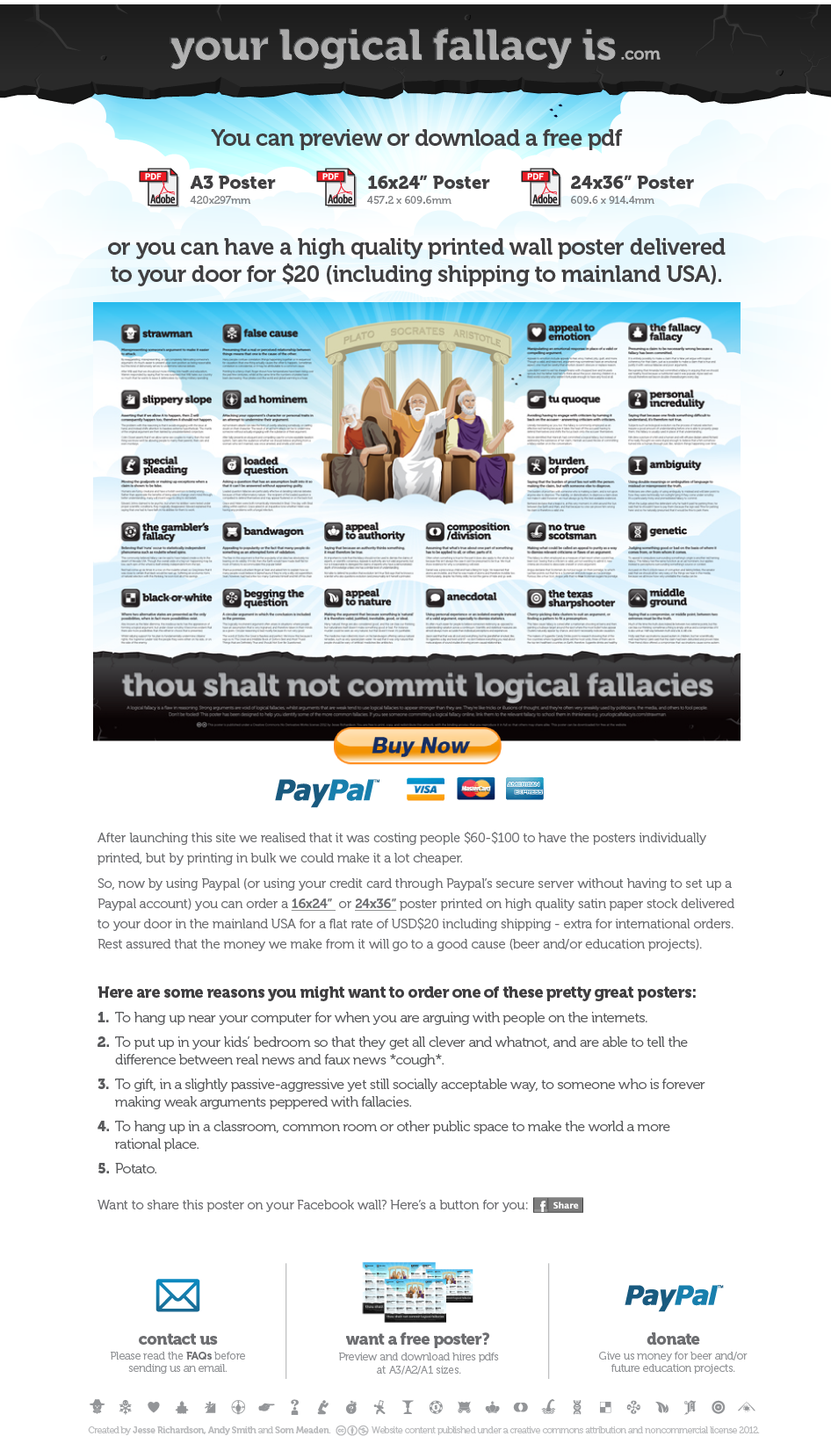
<style>
.page{position:relative;width:831px;height:1436px;background:#ffffff}
.page>*{position:absolute;margin:0}
.t1{font:22.8px "Museo-700";letter-spacing:-0.028em;color:#414042}
.t2{font:18.3px "Museo-900";color:#414042}
.t3{font:10.4px "Museo-500";color:#808285}
.t4{font:10.4px "Museo-900";color:#808285}
.t5{font:22.8px "Museo-700";letter-spacing:-0.025em;color:#414042}
.t6{font:13.2px/20.2px "Museo-300";letter-spacing:-0.01em;color:#6d6e71}
.t7{font:13.2px/20.2px "Museo-700";letter-spacing:-0.01em;color:#6d6e71;text-decoration:underline}
.t8{font:14px/17.6px "Museo-300";letter-spacing:-0.025em;color:#58595b}
.t9{font:15.6px "Museo-900";letter-spacing:-0.025em;color:#414042}
.t10{font:14px/17.6px "Museo-900";letter-spacing:-0.025em;color:#58595b}
.t11{font:13.2px "Museo-300";letter-spacing:-0.01em;color:#6d6e71}
.t12{font:16.2px "Museo-900";letter-spacing:-0.035em;color:#6d6e71}
.t13{font:10.8px "Museo-300";letter-spacing:-0.01em;color:#939598}
.t14{font:10.8px "Museo-700";letter-spacing:-0.01em;color:#6d6e71}
.t15{font:9.2px "Museo-300";letter-spacing:-0.035em;color:#babbbd}
.t16{font:9.2px "Museo-700";letter-spacing:-0.035em;color:#babbbd}
</style>
<div class="page">
<p class="t1" style="left:211px;top:129px;width:412px;height:21px">You can preview or download a free pdf</p>
<p class="t2" style="left:191px;top:176px;width:85px;height:13px">A3 Poster</p>
<p class="t2" style="left:368px;top:175px;width:122px;height:14px">16x24” Poster</p>
<p class="t2" style="left:571px;top:175px;width:123px;height:14px">24x36” Poster</p>
<p class="t3" style="left:190px;top:196px;width:61px;height:8px">420x297mm</p>
<p class="t3" style="left:367px;top:196px;width:84px;height:8px">457<span class="t4">.</span>2 x 609<span class="t4">.</span>6mm</p>
<p class="t3" style="left:571px;top:196px;width:83px;height:8px">609<span class="t4">.</span>6 x 914<span class="t4">.</span>4mm</p>
<p class="t5" style="left:108px;top:238px;width:617px;height:48px;text-align:center">or you can have a high quality printed wall poster delivered to your door for $20 (including shipping to mainland USA).</p>
<p class="t6" style="left:97px;top:832px;width:637px;height:119px">After launching this site we realised that it was costing people $60-$100 to have the posters individually printed, but by printing in bulk we could make it a lot cheaper. <br>So, now by using Paypal (or using your credit card through Paypal’s secure server without having to set up a Paypal account) you can order a <span class="t7">16x24” </span> or <span class="t7">24x36”</span> poster printed on high quality satin paper stock delivered to your door in the mainland USA for a flat rate of USD$20 including shipping - extra for international orders. Rest assured that the money we make from it will go to a good cause (beer and/or education projects).</p>
<p class="t8" style="left:97px;top:986px;width:608px;height:187px"><span class="t9">Here are some reasons you might want to order one of these pretty great posters:<br></span><span class="t10">1.</span>  To hang up near your computer for when you are arguing with people on the internets.<br><span class="t10">2.</span>  To put up in your kids’ bedroom so that they get all clever and whatnot, and are able to tell the <br> difference between real news and faux news *cough*.<br><span class="t10">3.</span>  To gift, in a slightly passive-aggressive yet still socially acceptable way, to someone who is forever <br> making weak arguments peppered with fallacies.<br><span class="t10">4. </span> To hang up in a classroom, common room or other public space to make the world a more <br> rational place.<br><span class="t10">5.</span>  Potato.</p>
<p class="t11" style="left:97px;top:1199px;width:431px;height:13px">Want to share this poster on your Facebook wall? Here’s a button for you:</p>
<p class="t12" style="left:139px;top:1333px;width:79px;height:11px">contact us</p>
<p class="t12" style="left:346px;top:1332px;width:144px;height:16px">want a free poster?</p>
<p class="t12" style="left:646px;top:1332px;width:54px;height:12px">donate</p>
<p class="t13" style="left:111px;top:1351px;width:134px;height:22px;text-align:center">Please read the <span class="t14">FAQs </span>before sending us an email.</p>
<p class="t13" style="left:339px;top:1352px;width:160px;height:22px;text-align:center">Preview and download hires pdfs<br>at A3/A2/A1 sizes.</p>
<p class="t13" style="left:599px;top:1351px;width:148px;height:22px;text-align:center">Give us money for beer and/or<br>future education projects.</p>
<p class="t15" style="left:88px;top:1426px;width:672px;height:9px">Created by <span class="t16">Jesse Richardson, Andy Smith</span> and <span class="t16">Som Meaden</span>.                   Website content published under a creative commons attribution and noncommercial license 2012.</p>
</div>
